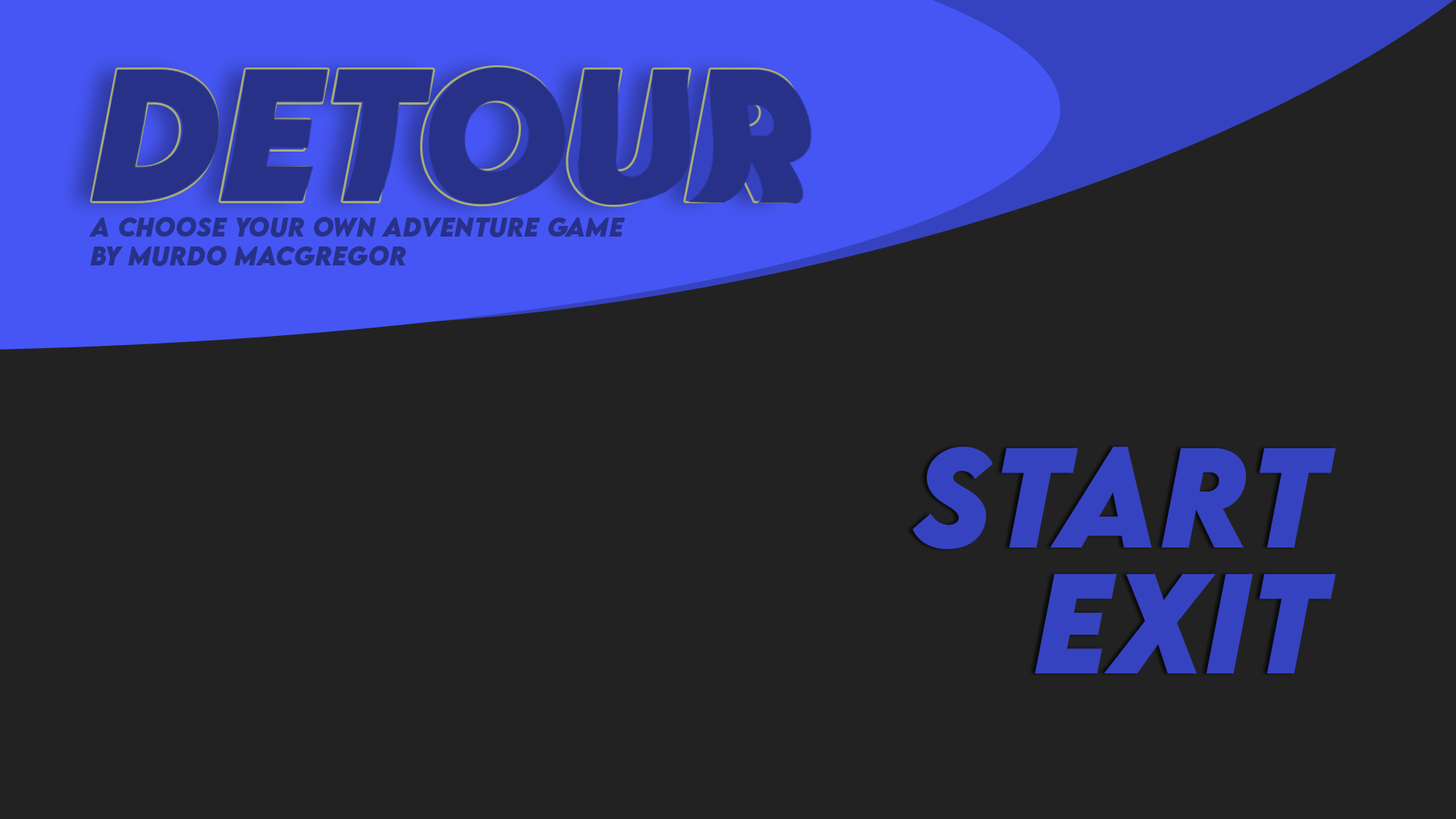
<style>
.page{position:relative;width:1456px;height:819px;background:#222222}
.page>*{position:absolute;margin:0}
.t1{font:167px "LEMONMILK-BoldItalic";color:#273188}
.t2{font:24px "LEMONMILK-BoldItalic";color:#273188}
.t3{font:126.4px "LEMONMILK-BoldItalic";color:#3643c0}
</style>
<div class="page">
<p class="t1" style="left:92px;top:67px;width:704px;height:138px">detour</p>
<p class="t2" style="left:89px;top:217px;width:536px;height:49px;text-align:right">a choose your own adventure game<br>by murdo macgregor</p>
<p class="t3" style="left:912px;top:447px;width:424px;height:102px">start</p>
<p class="t3" style="left:1035px;top:573px;width:301px;height:100px">exit</p>
</div>
